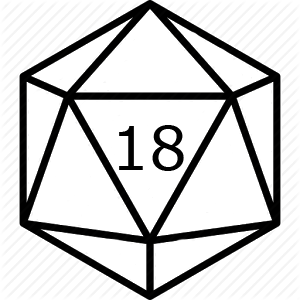
<style>
.page{position:relative;width:300px;height:300px;background:#ffffff}
.page>*{position:absolute;margin:0}
.t1{font:60px "MSReferenceSansSerif";color:#000000}
</style>
<div class="page">
<p class="t1" style="left:119px;top:125px;width:65px;height:46px">18</p>
</div>
